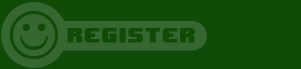
<style>
.page{position:relative;width:301px;height:69px;background:#104c08}
.page>*{position:absolute;margin:0}
.t1{font:17px "8BITWONDERNominal";letter-spacing:-0.01em;color:#104c08;font-weight:bold}
</style>
<div class="page">
<p class="t1" style="left:67px;top:28px;width:128px;height:15px">Register</p>
</div>
